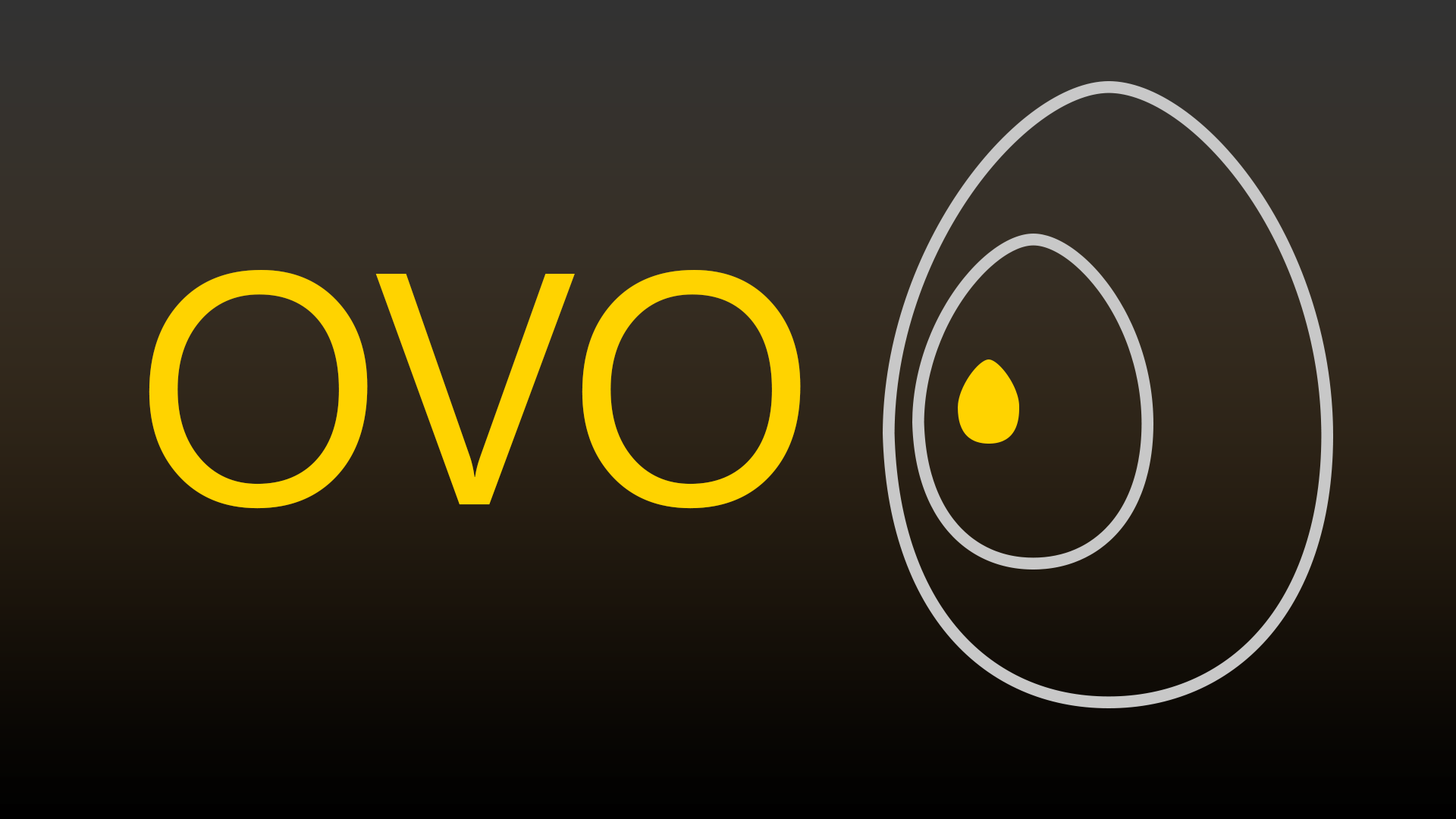
<style>
.page{position:relative;width:1456px;height:819px}
.page>*{position:absolute;margin:0}
.t1{font:329.5px "Gadugi";letter-spacing:-0.03em;color:#ffd300}
</style>
<div class="page">
<p class="t1" style="left:149px;top:270px;width:652px;height:239px">OVO</p>
</div>
